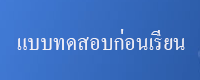
<style>
.page{position:relative;width:200px;height:80px}
.page>*{position:absolute;margin:0}
.t1{font:30.1px "AngsanaNew";color:#f0f0f7;scale:0.94 1}
</style>
<div class="page">
<p class="t1" style="left:17px;top:29px;width:168px;height:21px">แบบทดสอบก่อนเรียน</p>
</div>
